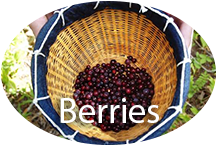
<style>
.page{position:relative;width:220px;height:147px;background:#ffffff}
.page>*{position:absolute;margin:0}
.t1{font:36px "MyriadPro-Regular";color:#fefefe}
</style>
<div class="page">
<p class="t1" style="left:60px;top:98px;width:99px;height:25px">Berries</p>
</div>
